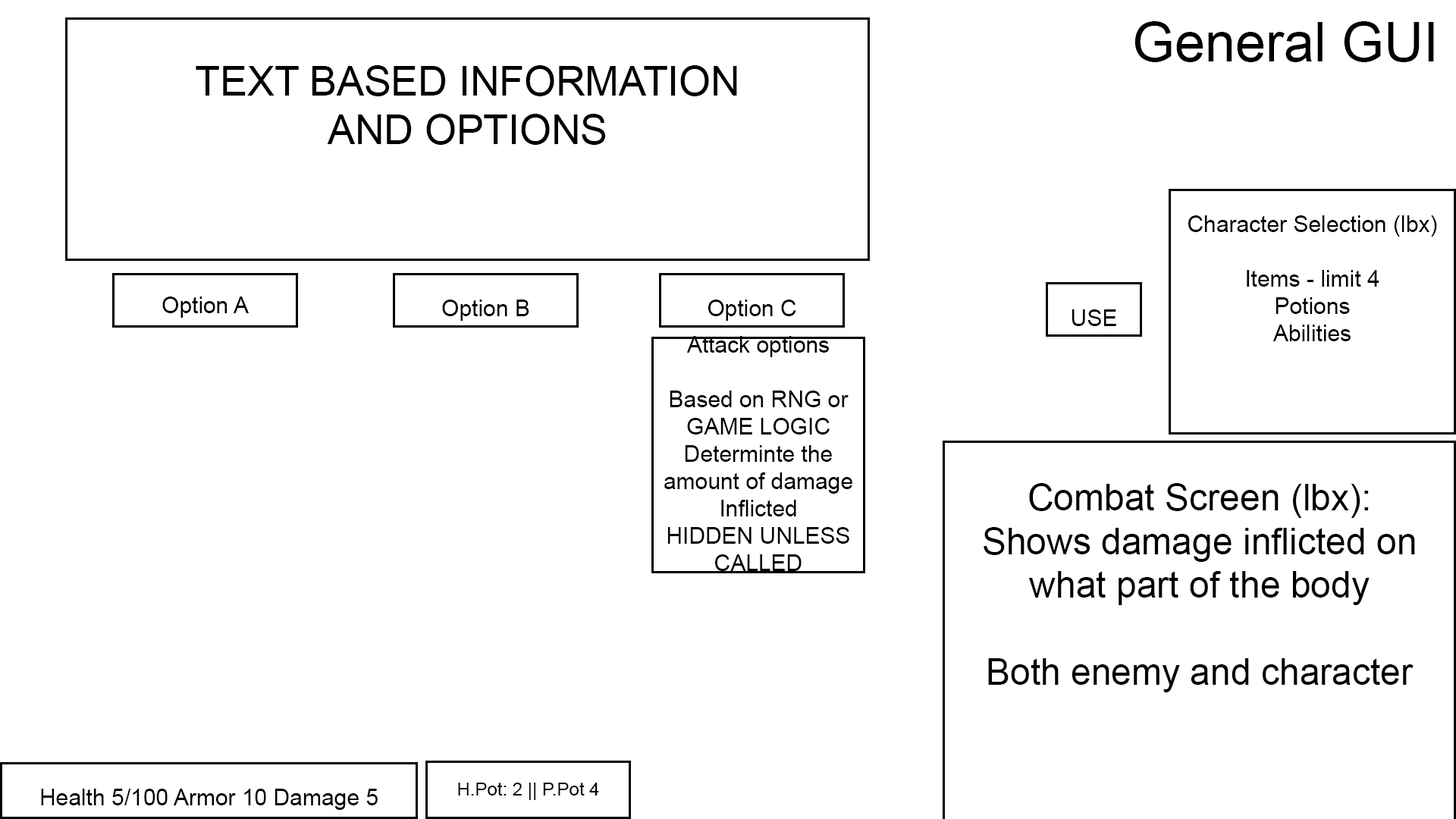
<style>
.page{position:relative;width:1456px;height:819px;background:#ffffff}
.page>*{position:absolute;margin:0}
.t1{font:54.5px "ArialMT";color:#000000}
.t2{font:40.7px "ArialMT";color:#000000}
.t3{font:22.7px "ArialMT";color:#000000}
.t4{font:18.2px "ArialMT";color:#000000}
.t5{font:36.4px "ArialMT";color:#000000}
</style>
<div class="page">
<p class="t1" style="left:1134px;top:21px;width:300px;height:41px">General GUI</p>
<p class="t2" style="left:196px;top:65px;width:541px;height:80px;text-align:center">TEXT BASED INFORMATION<br>AND OPTIONS</p>
<p class="t3" style="left:1188px;top:215px;width:249px;height:126px;text-align:center">Character Selection (lbx)<br><br>Items - limit 4<br>Potions<br>Abilities</p>
<p class="t3" style="left:162px;top:297px;width:87px;height:21px"><span class="t4"><br></span>Option A</p>
<p class="t3" style="left:442px;top:300px;width:87px;height:21px">Option B</p>
<p class="t3" style="left:708px;top:300px;width:88px;height:21px">Option C</p>
<p class="t3" style="left:1072px;top:309px;width:44px;height:17px">USE</p>
<p class="t3" style="left:664px;top:336px;width:188px;height:235px;text-align:center">Attack options<br><br>Based on RNG or<br>GAME LOGIC<br>Determinte the amount of damage<br>Inflicted<br>HIDDEN UNLESS<br>CALLED</p>
<p class="t5" style="left:984px;top:483px;width:431px;height:209px;text-align:center">Combat Screen (lbx):<br>Shows damage inflicted on what part of the body <br><br>Both enemy and character</p>
<p class="t4" style="left:458px;top:782px;width:141px;height:18px">H.Pot: 2 || P.Pot 4</p>
<p class="t3" style="left:41px;top:789px;width:337px;height:21px">Health 5/100 Armor 10 Damage 5</p>
</div>
